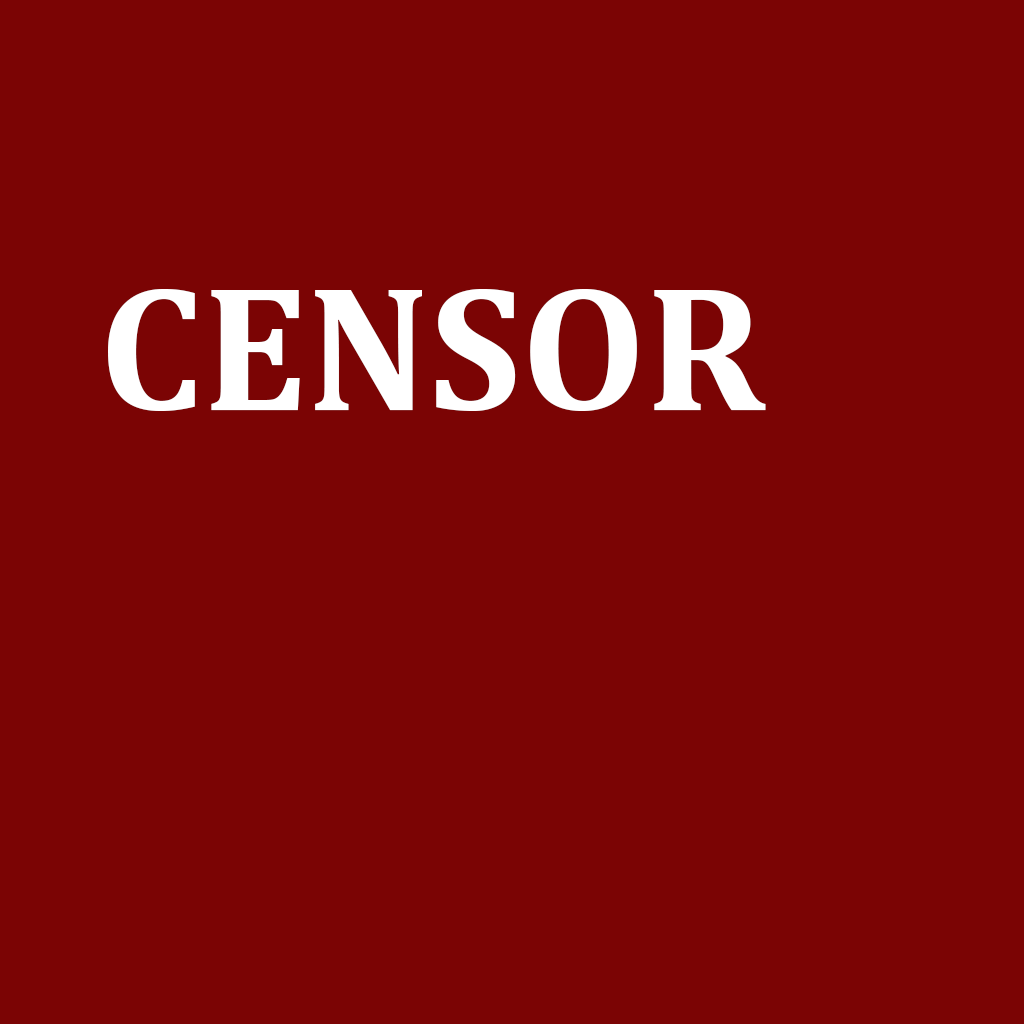
<style>
.page{position:relative;width:1024px;height:1024px;background:#7b0404}
.page>*{position:absolute;margin:0}
.t1{font:180px "Cambria-Bold";color:#ffffff}
</style>
<div class="page">
<p class="t1" style="left:108px;top:289px;width:658px;height:122px">CENSOR</p>
<p class="t1" style="left:108px;top:289px;width:658px;height:122px">CENSOR</p>
<p class="t1" style="left:108px;top:289px;width:658px;height:122px">CENSOR</p>
<p class="t1" style="left:108px;top:289px;width:658px;height:122px">CENSOR</p>
</div>
